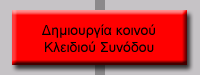
<style>
.page{position:relative;width:200px;height:75px;background:#ff0000}
.page>*{position:absolute;margin:0}
.t1{font:14px "ArialMT";color:#000000}
</style>
<div class="page">
<p class="t1" style="left:42px;top:24px;width:113px;height:28px;text-align:center">Δημιουργία κοινού<br>Κλειδιού Συνόδου</p>
</div>
